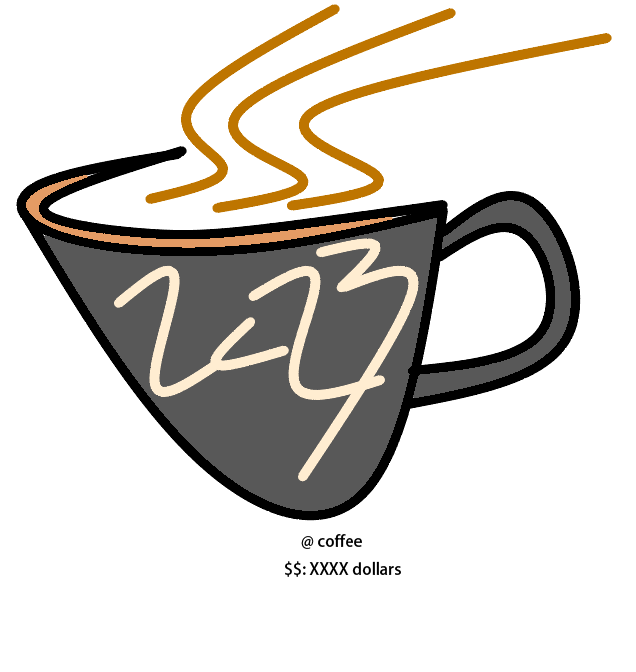
<style>
.page{position:relative;width:636px;height:672px;background:#ffffff}
.page>*{position:absolute;margin:0}
.t1{font:12px "AdobeFanHeitiStd-Bold";color:#000000}
</style>
<div class="page">
<p class="t1" style="left:301px;top:534px;width:61px;height:15px">@ coffee</p>
<p class="t1" style="left:285px;top:561px;width:116px;height:16px">$$: XXXX dollars</p>
</div>
